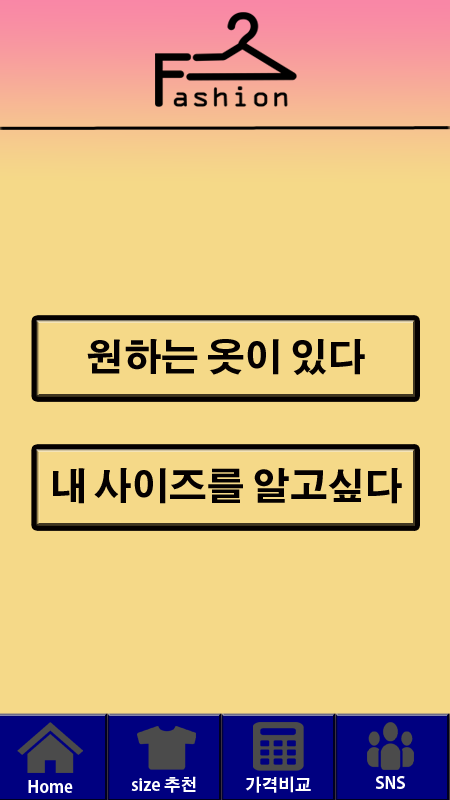
<style>
.page{position:relative;width:450px;height:800px;background:#f5d988}
.page>*{position:absolute;margin:0}
.t1{font:37.5px "AdobeGothicStd-Bold";color:#040000}
.t2{font:16.7px "AdobeGothicStd-Bold";color:#fefefe}
</style>
<div class="page">
<p class="t1" style="left:87px;top:339px;width:278px;height:36px">원하는 옷이 있다</p>
<p class="t1" style="left:53px;top:468px;width:349px;height:36px">내 사이즈를 알고싶다</p>
<p class="t2" style="left:28px;top:780px;width:45px;height:13px">Home</p>
<p class="t2" style="left:131px;top:776px;width:65px;height:17px">size 추천</p>
<p class="t2" style="left:245px;top:776px;width:66px;height:17px">가격비교</p>
<p class="t2" style="left:375px;top:776px;width:30px;height:13px">SNS</p>
</div>
